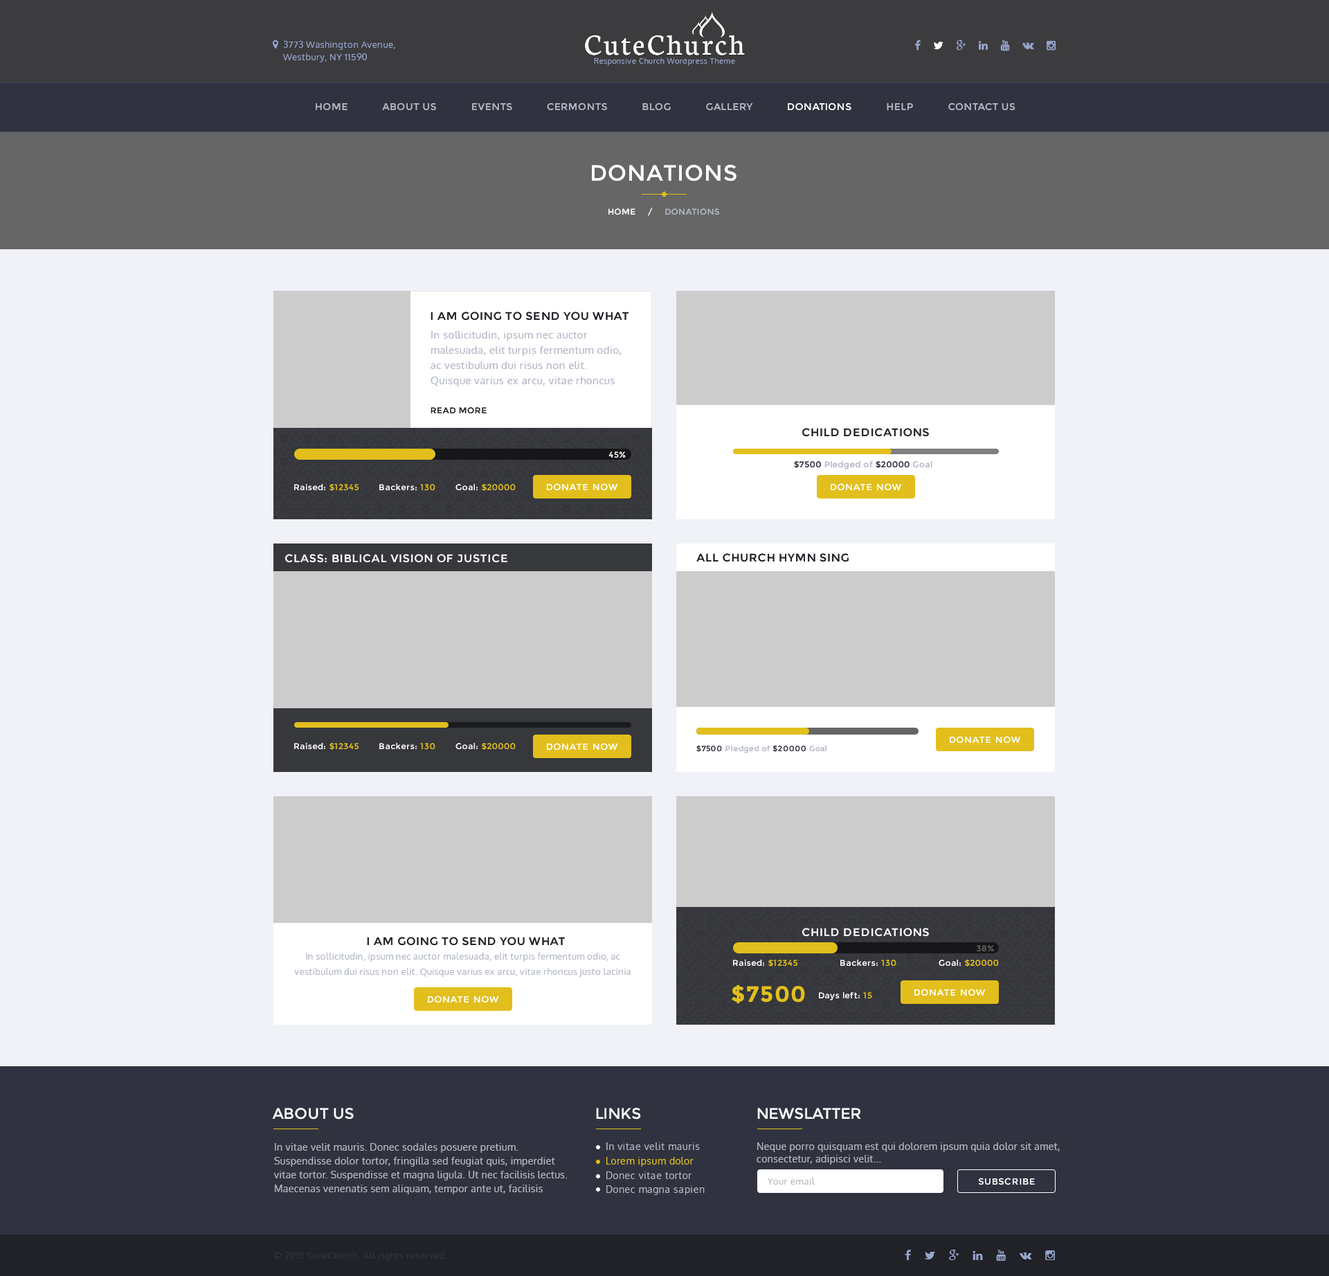
<style>
.page{position:relative;width:1329px;height:1276px;background:#f0f2f8}
.page>*{position:absolute;margin:0}
.t1{font:31.2px "Neuton-Regular";letter-spacing:0.07em;color:#ffffff}
.t2{font:7.6px "Oxygen-Regular";letter-spacing:0.05em;color:#96a5cd}
.t3{font:9.7px "Montserrat-Regular";letter-spacing:0.035em;color:#b3b8c5;text-transform:uppercase}
.t4{font:9.7px "Montserrat-Regular";letter-spacing:0.035em;color:#ffffff;text-transform:uppercase}
.t5{font:22.2px "Montserrat-Regular";letter-spacing:0.035em;color:#ffffff;text-transform:uppercase}
.t6{font:8.3px "Montserrat-Regular";letter-spacing:0.035em;color:#ffffff;text-transform:uppercase}
.t7{font:8.3px "Montserrat-Regular";letter-spacing:0.035em;color:#b3b8c5;text-transform:uppercase}
.t8{font:11.1px "Montserrat-Regular";letter-spacing:0.05em;color:#212227;text-transform:uppercase}
.t9{font:10.4px/15.2px "Oxygen-Regular";letter-spacing:0.025em;color:#b3b8c5}
.t10{font:8.3px "Montserrat-Regular";letter-spacing:0.05em;color:#212227;text-transform:uppercase}
.t11{font:8.3px "Montserrat-Regular";letter-spacing:0.05em;color:#ffffff}
.t12{font:8.3px "Montserrat-Regular";letter-spacing:0.05em;color:#b3b8c5}
.t13{font:8.3px "Montserrat-Regular";letter-spacing:0.05em;color:#30333f}
.t14{font:8.3px "Montserrat-Regular";letter-spacing:0.05em;color:#e2bf1d}
.t15{font:9px "Montserrat-Regular";letter-spacing:0.05em;color:#ffffff;text-transform:uppercase}
.t16{font:11.1px "Montserrat-Regular";letter-spacing:0.05em;color:#ffffff;text-transform:uppercase}
.t17{font:7.6px "Montserrat-Regular";letter-spacing:0.05em;color:#b3b8c5}
.t18{font:7.6px "Montserrat-Regular";letter-spacing:0.05em;color:#30333f}
.t19{font:9px/15.2px "Oxygen-Regular";letter-spacing:0.025em;color:#b3b8c5}
.t20{font:8.3px "Montserrat-Regular";letter-spacing:0.05em;color:#666666}
.t21{font:22.2px "Montserrat-Bold";letter-spacing:0.05em;color:#e2bf1d}
.t22{font:15.2px "Montserrat-Regular";color:#ffffff;text-transform:uppercase}
.t23{font:9.7px/13.8px "Oxygen-Regular";letter-spacing:0.03em;color:#b3b8c5}
.t24{font:9.7px "Oxygen-Regular";letter-spacing:0.03em;color:#b3b8c5}
.t25{font:9.7px/12.5px "Oxygen-Regular";letter-spacing:0.03em;color:#b3b8c5}
.t26{font:9.7px "Oxygen-Regular";letter-spacing:0.03em;color:#e2bf1d}
.t27{font:9px "Oxygen-Regular";letter-spacing:0.05em;color:#b8b8b8}
.t28{font:9px "Oxygen-Regular";letter-spacing:0.05em;color:#30333f}
</style>
<div class="page">
<p class="t1" style="left:585px;top:35px;width:160px;height:20px">CuteChurch</p>
<p class="t2" style="left:594px;top:58px;width:141px;height:8px">Responsive Church Wordpress Theme</p>
<p class="t3" style="left:316px;top:103px;width:700px;height:8px">Home           About Us           Events           Cermonts           Blog           Gallery           <span class="t4">Donations           </span>Help           Contact Us</p>
<p class="t5" style="left:592px;top:165px;width:145px;height:16px">donations</p>
<p class="t6" style="left:609px;top:208px;width:110px;height:8px">Home     /     <span class="t7">donations</span></p>
<p class="t8" style="left:431px;top:312px;width:198px;height:9px">I am going to send you what</p>
<p class="t9" style="left:431px;top:331px;width:190px;height:56px">In sollicitudin, ipsum nec auctor malesuada, elit turpis fermentum odio, ac vestibulum dui risus non elit. Quisque varius ex arcu, vitae rhoncus justo lacinia ac. Nunc eu bibendum mauris, et tincidunt ex.</p>
<p class="t10" style="left:431px;top:407px;width:56px;height:6px">read more</p>
<p class="t8" style="left:802px;top:428px;width:127px;height:9px">Child Dedications</p>
<p class="t11" style="left:609px;top:451px;width:17px;height:7px">45%</p>
<p class="t12" style="left:794px;top:461px;width:139px;height:8px"><span class="t13">$7500</span> Pledged of <span class="t13">$20000</span> Goal</p>
<p class="t11" style="left:294px;top:483px;width:65px;height:8px">Raised: <span class="t14">$12345</span></p>
<p class="t11" style="left:379px;top:484px;width:56px;height:7px">Backers: <span class="t14">130</span></p>
<p class="t14" style="left:456px;top:484px;width:60px;height:7px"><span class="t11">Goal: </span>$20000</p>
<p class="t15" style="left:547px;top:483px;width:71px;height:7px">donate now</p>
<p class="t15" style="left:831px;top:483px;width:71px;height:7px">donate now</p>
<p class="t16" style="left:285px;top:554px;width:222px;height:9px">Class: Biblical Vision of Justice</p>
<p class="t8" style="left:696px;top:553px;width:153px;height:9px">All Church Hymn Sing</p>
<p class="t15" style="left:950px;top:736px;width:71px;height:7px">donate now</p>
<p class="t11" style="left:294px;top:742px;width:65px;height:8px">Raised: <span class="t14">$12345</span></p>
<p class="t11" style="left:379px;top:743px;width:56px;height:7px">Backers: <span class="t14">130</span></p>
<p class="t14" style="left:456px;top:743px;width:60px;height:7px"><span class="t11">Goal: </span>$20000</p>
<p class="t15" style="left:547px;top:743px;width:71px;height:7px">donate now</p>
<p class="t17" style="left:696px;top:745px;width:131px;height:8px"><span class="t18">$7500</span> Pledged of <span class="t18">$20000</span> Goal</p>
<p class="t16" style="left:802px;top:928px;width:127px;height:9px">Child Dedications</p>
<p class="t8" style="left:367px;top:937px;width:198px;height:9px">I am going to send you what</p>
<p class="t19" style="left:294px;top:953px;width:337px;height:24px;text-align:center">In sollicitudin, ipsum nec auctor malesuada, elit turpis fermentum odio, ac vestibulum dui risus non elit. Quisque varius ex arcu, vitae rhoncus justo lacinia ac. Nunc eu bibendum mauris, et tincidunt ex.</p>
<p class="t20" style="left:977px;top:945px;width:17px;height:7px">38%</p>
<p class="t11" style="left:733px;top:959px;width:65px;height:7px">Raised: <span class="t14">$12345</span></p>
<p class="t11" style="left:840px;top:960px;width:57px;height:6px">Backers: <span class="t14">130</span></p>
<p class="t14" style="left:939px;top:960px;width:60px;height:6px"><span class="t11">Goal: </span>$20000</p>
<p class="t21" style="left:732px;top:984px;width:73px;height:20px">$7500</p>
<p class="t15" style="left:915px;top:989px;width:71px;height:7px">donate now</p>
<p class="t15" style="left:428px;top:996px;width:71px;height:6px">donate now</p>
<p class="t11" style="left:819px;top:992px;width:53px;height:8px">Days left: <span class="t14">15</span></p>
<p class="t22" style="left:272px;top:1108px;width:82px;height:11px">about us</p>
<p class="t22" style="left:596px;top:1108px;width:45px;height:11px">links</p>
<p class="t22" style="left:757px;top:1108px;width:104px;height:11px">newslatter</p>
<p class="t23" style="left:273px;top:1143px;width:295px;height:51px">In vitae velit mauris. Donec sodales posuere pretium. Suspendisse dolor tortor, fringilla sed feugiat quis, imperdiet vitae tortor. Suspendisse et magna ligula. Ut nec facilisis lectus. Maecenas venenatis sem aliquam, tempor ante ut, facilisis ipsum. Aenean finibus justo et odio lobortis feugiat. In vulputate lacinia ex sit amet molestie.</p>
<p class="t24" style="left:606px;top:1142px;width:94px;height:8px">In vitae velit mauris</p>
<p class="t25" style="left:757px;top:1142px;width:303px;height:22px">Neque porro quisquam est qui dolorem ipsum quia dolor sit amet, <br>consectetur, adipisci velit...</p>
<p class="t26" style="left:606px;top:1157px;width:88px;height:10px">Lorem ipsum dolor</p>
<p class="t24" style="left:606px;top:1171px;width:86px;height:8px">Donec vitae tortor</p>
<p class="t27" style="left:768px;top:1178px;width:47px;height:7px">Your email</p>
<p class="t15" style="left:978px;top:1178px;width:57px;height:7px">subscribe</p>
<p class="t24" style="left:606px;top:1185px;width:99px;height:10px">Donec magna sapien</p>
<p class="t28" style="left:273px;top:1252px;width:174px;height:9px">© 2015 CuteChurch. All rights reserved.</p>
</div>
